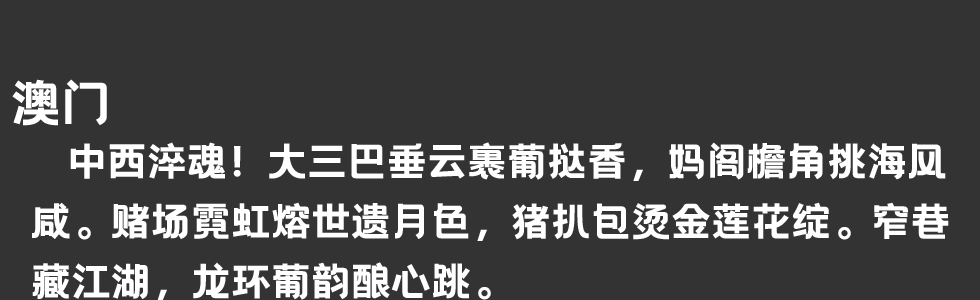
<style>
.page{position:relative;width:980px;height:300px;background:#333333}
.page>*{position:absolute;margin:0}
.t1{font:50px "HelloFont-WenYiHei";color:#ffffff}
.t2{font:40px/60px "HelloFont-WenYiHei";color:#ffffff}
</style>
<div class="page">
<p class="t1" style="left:12px;top:79px;width:95px;height:47px">澳门</p>
<p class="t2" style="left:32px;top:142px;width:917px;height:159px">中西淬魂！大三巴垂云裹葡挞香，妈阁檐角挑海风<br>咸。赌场霓虹熔世遗月色，猪扒包烫金莲花绽。窄巷<br>藏江湖，龙环葡韵酿心跳。</p>
</div>
